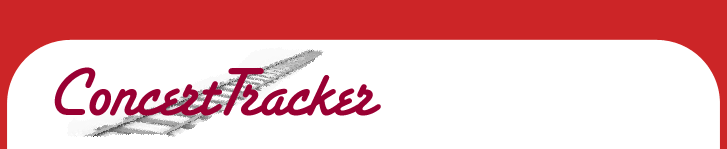
<style>
.page{position:relative;width:727px;height:149px;background:#ffffff}
.page>*{position:absolute;margin:0}
.t1{font:72px "SantaFeLetPlain";color:#990033}
</style>
<div class="page">
<p class="t1" style="left:54px;top:67px;width:327px;height:49px">ConcertTracker</p>
</div>
